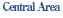
<style>
.page{position:relative;width:63px;height:18px;background:#ffffff}
.page>*{position:absolute;margin:0}
.t1{font:12px "RyuminPro-ExBold";letter-spacing:-0.08em;color:#2f4e96;scale:0.9 1}
</style>
<div class="page">
<p class="t1" style="left:3px;top:1px;width:58px;height:10px">Central Area</p>
</div>
